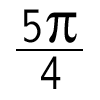
<style>
.page{position:relative;width:100px;height:100px;background:#ffffff}
.page>*{position:absolute;margin:0}
.t1{font:49.8px "AbadiMT-CondensedLight";letter-spacing:0.025em;color:#000000;text-transform:uppercase}
.t2{font:65.8px "AbadiMT-CondensedLight";letter-spacing:0.025em;color:#000000;text-transform:uppercase}
</style>
<div class="page">
<p class="t1" style="left:24px;top:9px;width:53px;height:34px">5<span class="t2">π</span></p>
<p class="t1" style="left:41px;top:56px;width:20px;height:33px">4</p>
</div>
